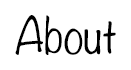
<style>
.page{position:relative;width:131px;height:70px;background:#ffffff}
.page>*{position:absolute;margin:0}
.t1{font:45px "Noteworthy-Light";color:#000000}
</style>
<div class="page">
<p class="t1" style="left:15px;top:15px;width:101px;height:40px">About</p>
</div>
